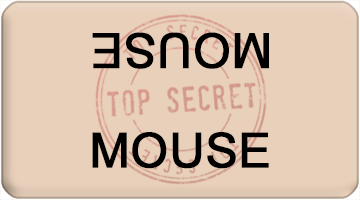
<style>
.page{position:relative;width:360px;height:200px;background:#e8d0bb}
.page>*{position:absolute;margin:0}
.t1{font:48px "ArialMT";color:#000000;font-weight:bold}
</style>
<div class="page">
<p class="t1" style="left:92px;top:32px;width:177px;height:37px;rotate:180deg">MOUSE</p>
<p class="t1" style="left:92px;top:132px;width:177px;height:37px">MOUSE</p>
</div>
